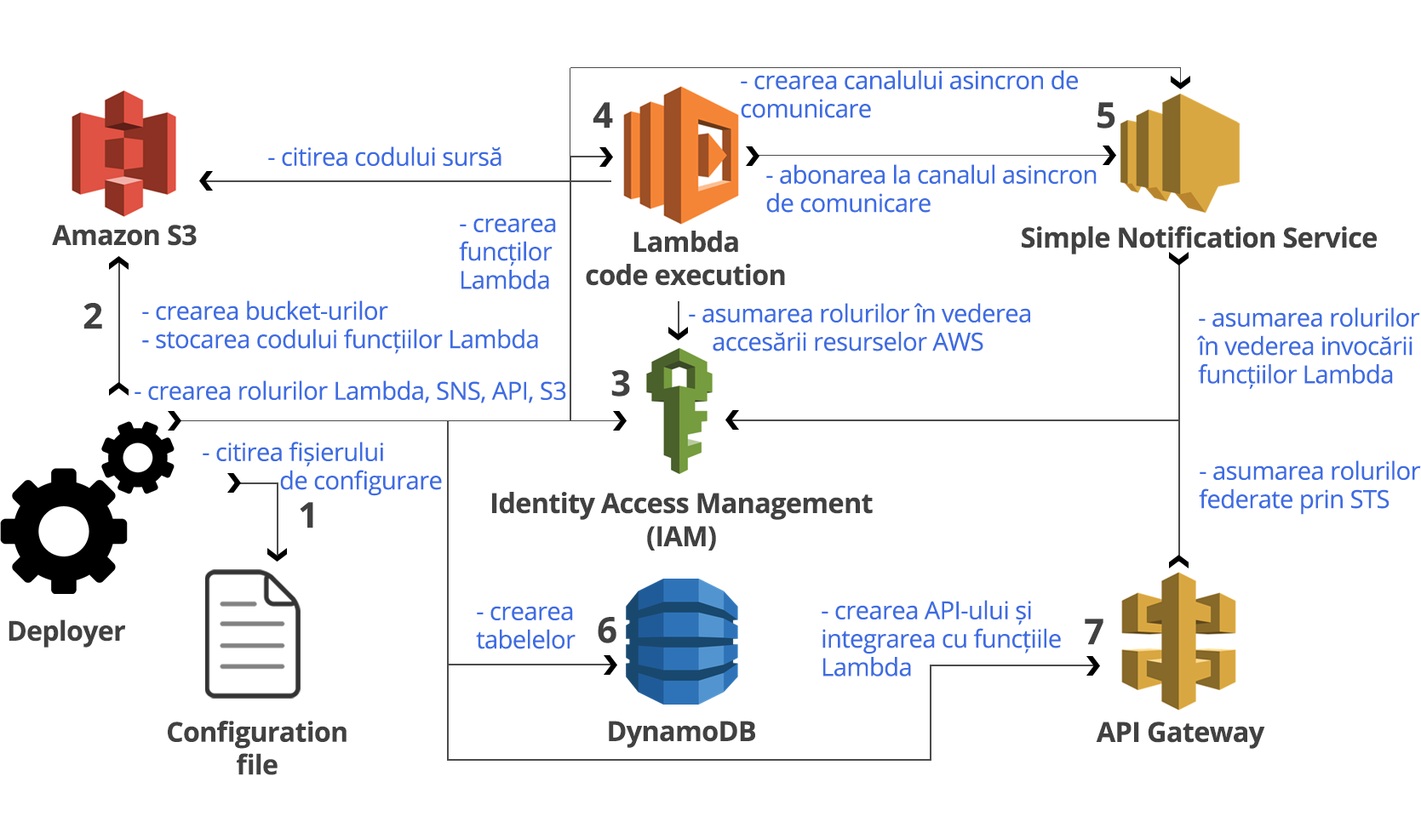
<style>
.page{position:relative;width:1421px;height:839px;background:#ffffff}
.page>*{position:absolute;margin:0}
.t1{font:24.8px/28.4px "OpenSans";letter-spacing:-0.02em;color:#3d6ce2}
.t2{font:35.5px "OpenSans-Bold";letter-spacing:-0.02em;color:#414141}
.t3{font:24.8px "OpenSans";letter-spacing:-0.02em;color:#3d6ce2}
.t4{font:27.6px "OpenSans-Bold";letter-spacing:-0.02em;color:#414141}
.t5{font:27.6px/33.1px "OpenSans-Bold";letter-spacing:-0.02em;color:#414141}
.t6{font:27.3px "OpenSans-Bold";letter-spacing:-0.02em;color:#414141}
.t7{font:27.3px/32.7px "OpenSans-Bold";letter-spacing:-0.02em;color:#414141}
</style>
<div class="page">
<p class="t1" style="left:741px;top:70px;width:337px;height:48px">- crearea canalului asincron de <br>comunicare</p>
<p class="t2" style="left:592px;top:102px;width:21px;height:27px">4</p>
<p class="t2" style="left:1097px;top:102px;width:18px;height:27px">5</p>
<p class="t3" style="left:268px;top:146px;width:233px;height:20px">- citirea codului sursă</p>
<p class="t1" style="left:766px;top:164px;width:330px;height:49px">- abonarea la canalul asincron<br>de comunicare</p>
<p class="t1" style="left:459px;top:218px;width:97px;height:71px">- crearea<br>funcților<br>Lambda</p>
<p class="t4" style="left:52px;top:225px;width:145px;height:21px">Amazon S3</p>
<p class="t5" style="left:586px;top:231px;width:199px;height:55px;text-align:center">Lambda <br>code execution</p>
<p class="t4" style="left:1021px;top:226px;width:355px;height:29px">Simple Notification Service</p>
<p class="t2" style="left:83px;top:303px;width:19px;height:26px">2</p>
<p class="t1" style="left:142px;top:300px;width:396px;height:54px">- crearea bucket-urilor<br>- stocarea codului funcțiilor Lambda</p>
<p class="t1" style="left:689px;top:303px;width:341px;height:49px">- asumarea rolurilor în vederea<br>    accesării resurselor AWS</p>
<p class="t1" style="left:1197px;top:307px;width:223px;height:82px">- asumarea rolurilor<br>în vederea invocării <br>funcțiilor Lambda</p>
<p class="t2" style="left:611px;top:370px;width:19px;height:27px">3</p>
<p class="t3" style="left:134px;top:381px;width:432px;height:22px">- crearea rolurilor Lambda, SNS, API, S3</p>
<p class="t1" style="left:203px;top:442px;width:239px;height:54px">- citirea fișierului<br>             de configurare</p>
<p class="t1" style="left:1199px;top:461px;width:222px;height:54px">- asumarea rolurilor<br>federate prin STS</p>
<p class="t5" style="left:492px;top:492px;width:381px;height:59px;text-align:center">Identity Access Management<br>(IAM)</p>
<p class="t2" style="left:300px;top:502px;width:13px;height:27px">1</p>
<p class="t1" style="left:821px;top:600px;width:240px;height:77px">- crearea API-ului și<br>integrarea cu funcțiile<br>Lambda</p>
<p class="t1" style="left:476px;top:606px;width:99px;height:43px">- crearea<br>tabelelor</p>
<p class="t2" style="left:598px;top:617px;width:18px;height:27px">6</p>
<p class="t6" style="left:9px;top:620px;width:116px;height:28px">Deployer</p>
<p class="t2" style="left:1084px;top:619px;width:19px;height:26px">7</p>
<p class="t7" style="left:168px;top:721px;width:178px;height:54px;text-align:center">Configuration<br>file</p>
<p class="t4" style="left:609px;top:721px;width:146px;height:27px">DynamoDB</p>
<p class="t4" style="left:1096px;top:722px;width:169px;height:27px">API Gateway</p>
</div>
